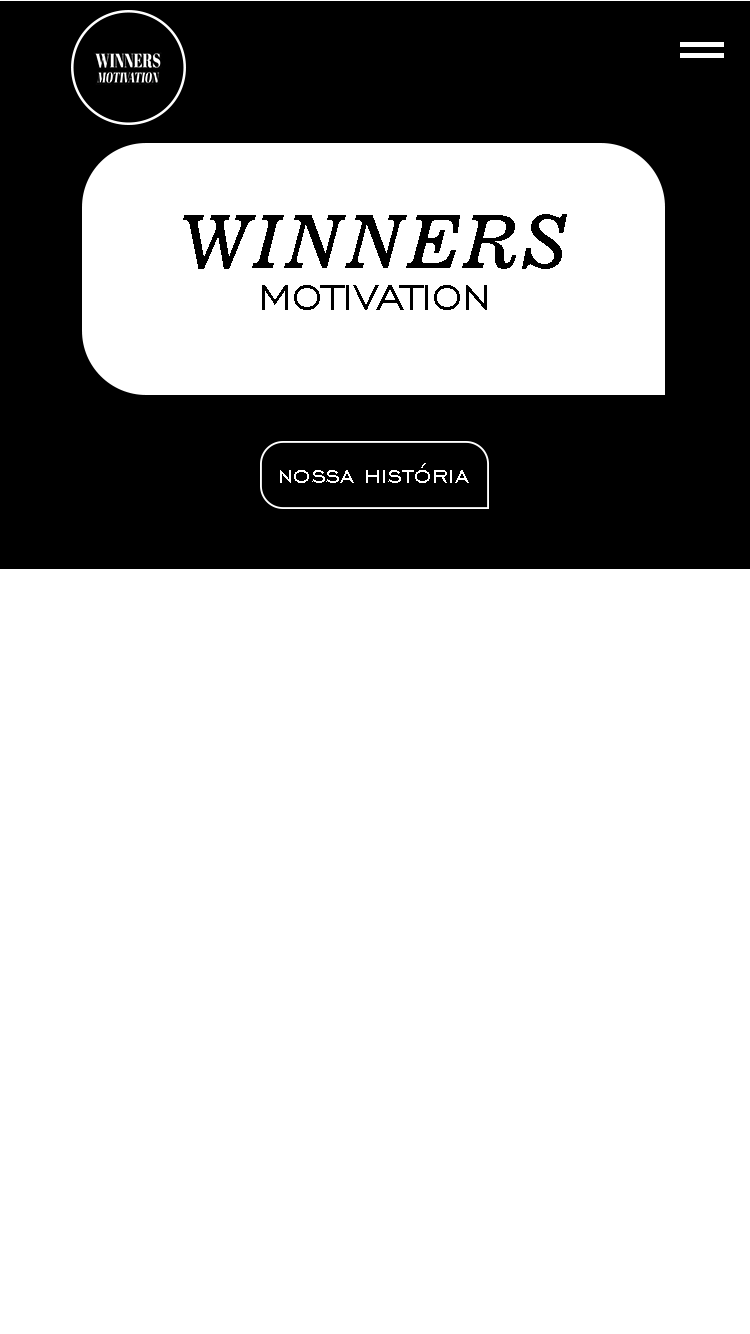
<style>
.page{position:relative;width:750px;height:1334px;background:#ffffff}
.page>*{position:absolute;margin:0}
.t1{font:73.5px "News701BT-ItalicA";color:#000000}
.t2{font:47.2px "EngraversGothicBT-Regular";color:#000000}
.t3{font:30.2px "EngraversGothicBT-Regular";color:#ffffff}
</style>
<div class="page">
<p class="t1" style="left:183px;top:214px;width:384px;height:55px">WINNERS</p>
<p class="t2" style="left:262px;top:285px;width:225px;height:25px">MOTIVATION</p>
<p class="t3" style="left:280px;top:463px;width:189px;height:20px">nossa história</p>
</div>
